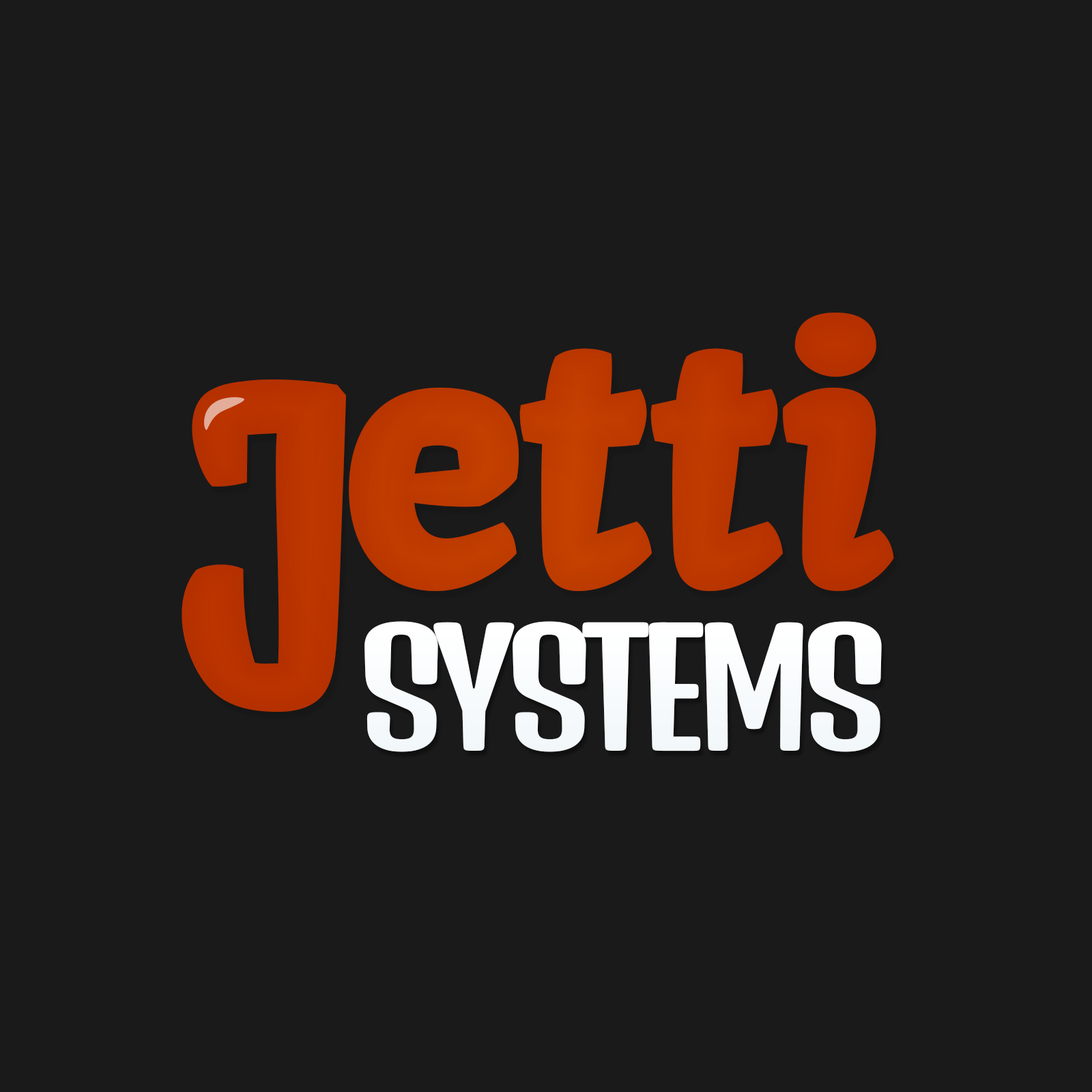
<style>
.page{position:relative;width:1092px;height:1092px;background:#1a1a1a}
.page>*{position:absolute;margin:0}
.t1{font:345.1px "Kavoon-Regular";letter-spacing:-0.08em;color:#c64600}
.t2{font:345.1px "Kavoon-Regular";letter-spacing:-0.04em;color:#c64600}
.t3{font:345.1px "Kavoon-Regular";letter-spacing:-0.013em;color:#c64600}
.t4{font:345.1px "Kavoon-Regular";letter-spacing:-0.02em;color:#c64600}
.t5{font:155.4px "DenkOne-Regular";letter-spacing:-0.08em;color:#ffffff;text-transform:uppercase}
</style>
<div class="page">
<p class="t1" style="left:182px;top:313px;width:712px;height:399px">J<span class="t2">e</span><span class="t3">t</span><span class="t4">t</span><span class="t2">i</span></p>
<p class="t5" style="left:364px;top:621px;width:518px;height:131px">systems</p>
</div>
